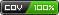
<style>
.page{position:relative;width:59px;height:15px}
.page>*{position:absolute;margin:0}
.t1{font:10.4px "VisitorTT1BRK";letter-spacing:-0.02em;color:#ffffff}
</style>
<div class="page">
<p class="t1" style="left:5px;top:5px;width:17px;height:5px">COV</p>
<p class="t1" style="left:34px;top:5px;width:20px;height:5px">100%</p>
</div>
